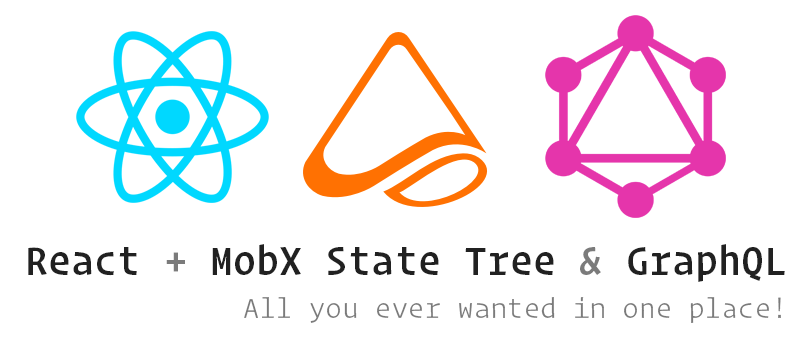
<style>
.page{position:relative;width:800px;height:350px;background:#ffffff}
.page>*{position:absolute;margin:0}
.t1{font:42px "OperatorMono-Medium";color:#212121}
.t2{font:42px "OperatorMono-Medium";color:#7b7b7b}
.t3{font:30px "OperatorMono-Light";color:#7b7b7b}
</style>
<div class="page">
<p class="t1" style="left:28px;top:244px;width:757px;height:38px">React <span class="t2">+</span> MobX State Tree <span class="t2">&amp;</span> GraphQL</p>
<p class="t3" style="left:244px;top:297px;width:537px;height:26px">All you ever wanted in one place!</p>
</div>
